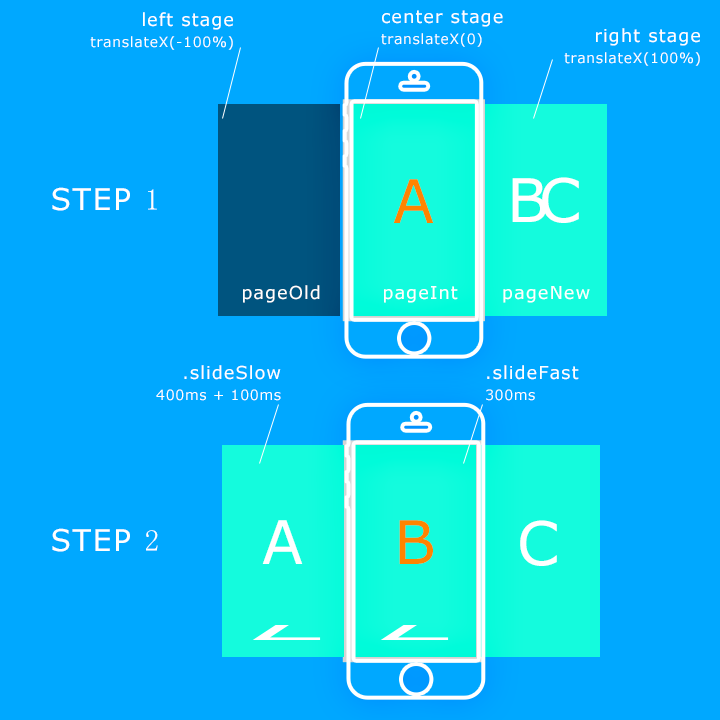
<style>
.page{position:relative;width:720px;height:720px;background:#00a8ff}
.page>*{position:absolute;margin:0}
.t1{font:14px/24px "Verdana";letter-spacing:0.05em;color:#ffffff}
.t2{font:18px/24px "Verdana";letter-spacing:0.05em;color:#ffffff}
.t3{font:60px "Verdana";letter-spacing:0.05em;color:#ff8400}
.t4{font:60px "Verdana";letter-spacing:0.05em;color:#ffffff}
.t5{font:30px "Verdana";letter-spacing:0.05em;color:#ffffff}
.t6{font:30px "SimSun";letter-spacing:0.05em;color:#ffffff}
.t7{font:18px "Verdana";letter-spacing:0.05em;color:#fffffe}
</style>
<div class="page">
<p class="t1" style="left:90px;top:12px;width:143px;height:38px;text-align:right"><span class="t2">left stage<br></span>translateX(-100%)</p>
<p class="t1" style="left:381px;top:10px;width:122px;height:37px"><span class="t2">center stage<br></span>translateX(0)</p>
<p class="t1" style="left:564px;top:28px;width:136px;height:38px;text-align:right"><span class="t2">right stage<br></span>translateX(100%)</p>
<p class="t3" style="left:393px;top:179px;width:41px;height:44px">A</p>
<p class="t4" style="left:512px;top:178px;width:34px;height:44px">B</p>
<p class="t4" style="left:542px;top:177px;width:37px;height:46px">C</p>
<p class="t5" style="left:52px;top:187px;width:105px;height:24px">STEP <span class="t6">1</span></p>
<p class="t7" style="left:243px;top:285px;width:77px;height:18px">pageOld</p>
<p class="t7" style="left:384px;top:286px;width:74px;height:17px">pageInt</p>
<p class="t7" style="left:503px;top:286px;width:87px;height:17px">pageNew</p>
<p class="t1" style="left:156px;top:365px;width:125px;height:36px;text-align:right"><span class="t2">.slideSlow<br></span>400ms + 100ms</p>
<p class="t2" style="left:486px;top:365px;width:93px;height:36px">.slideFast<br><span class="t1">300ms</span></p>
<p class="t4" style="left:262px;top:520px;width:41px;height:44px">A</p>
<p class="t3" style="left:399px;top:520px;width:34px;height:44px">B</p>
<p class="t4" style="left:520px;top:520px;width:37px;height:46px">C</p>
<p class="t5" style="left:52px;top:528px;width:106px;height:24px">STEP <span class="t6">2</span></p>
</div>
